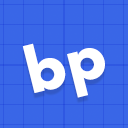
<style>
.page{position:relative;width:128px;height:128px;background:#3966e7}
.page>*{position:absolute;margin:0}
.t1{font:58.3px "Futura-Bold";color:#ffffff}
</style>
<div class="page">
<p class="t1" style="left:22px;top:43px;width:83px;height:55px;rotate:-14deg">bp</p>
</div>
